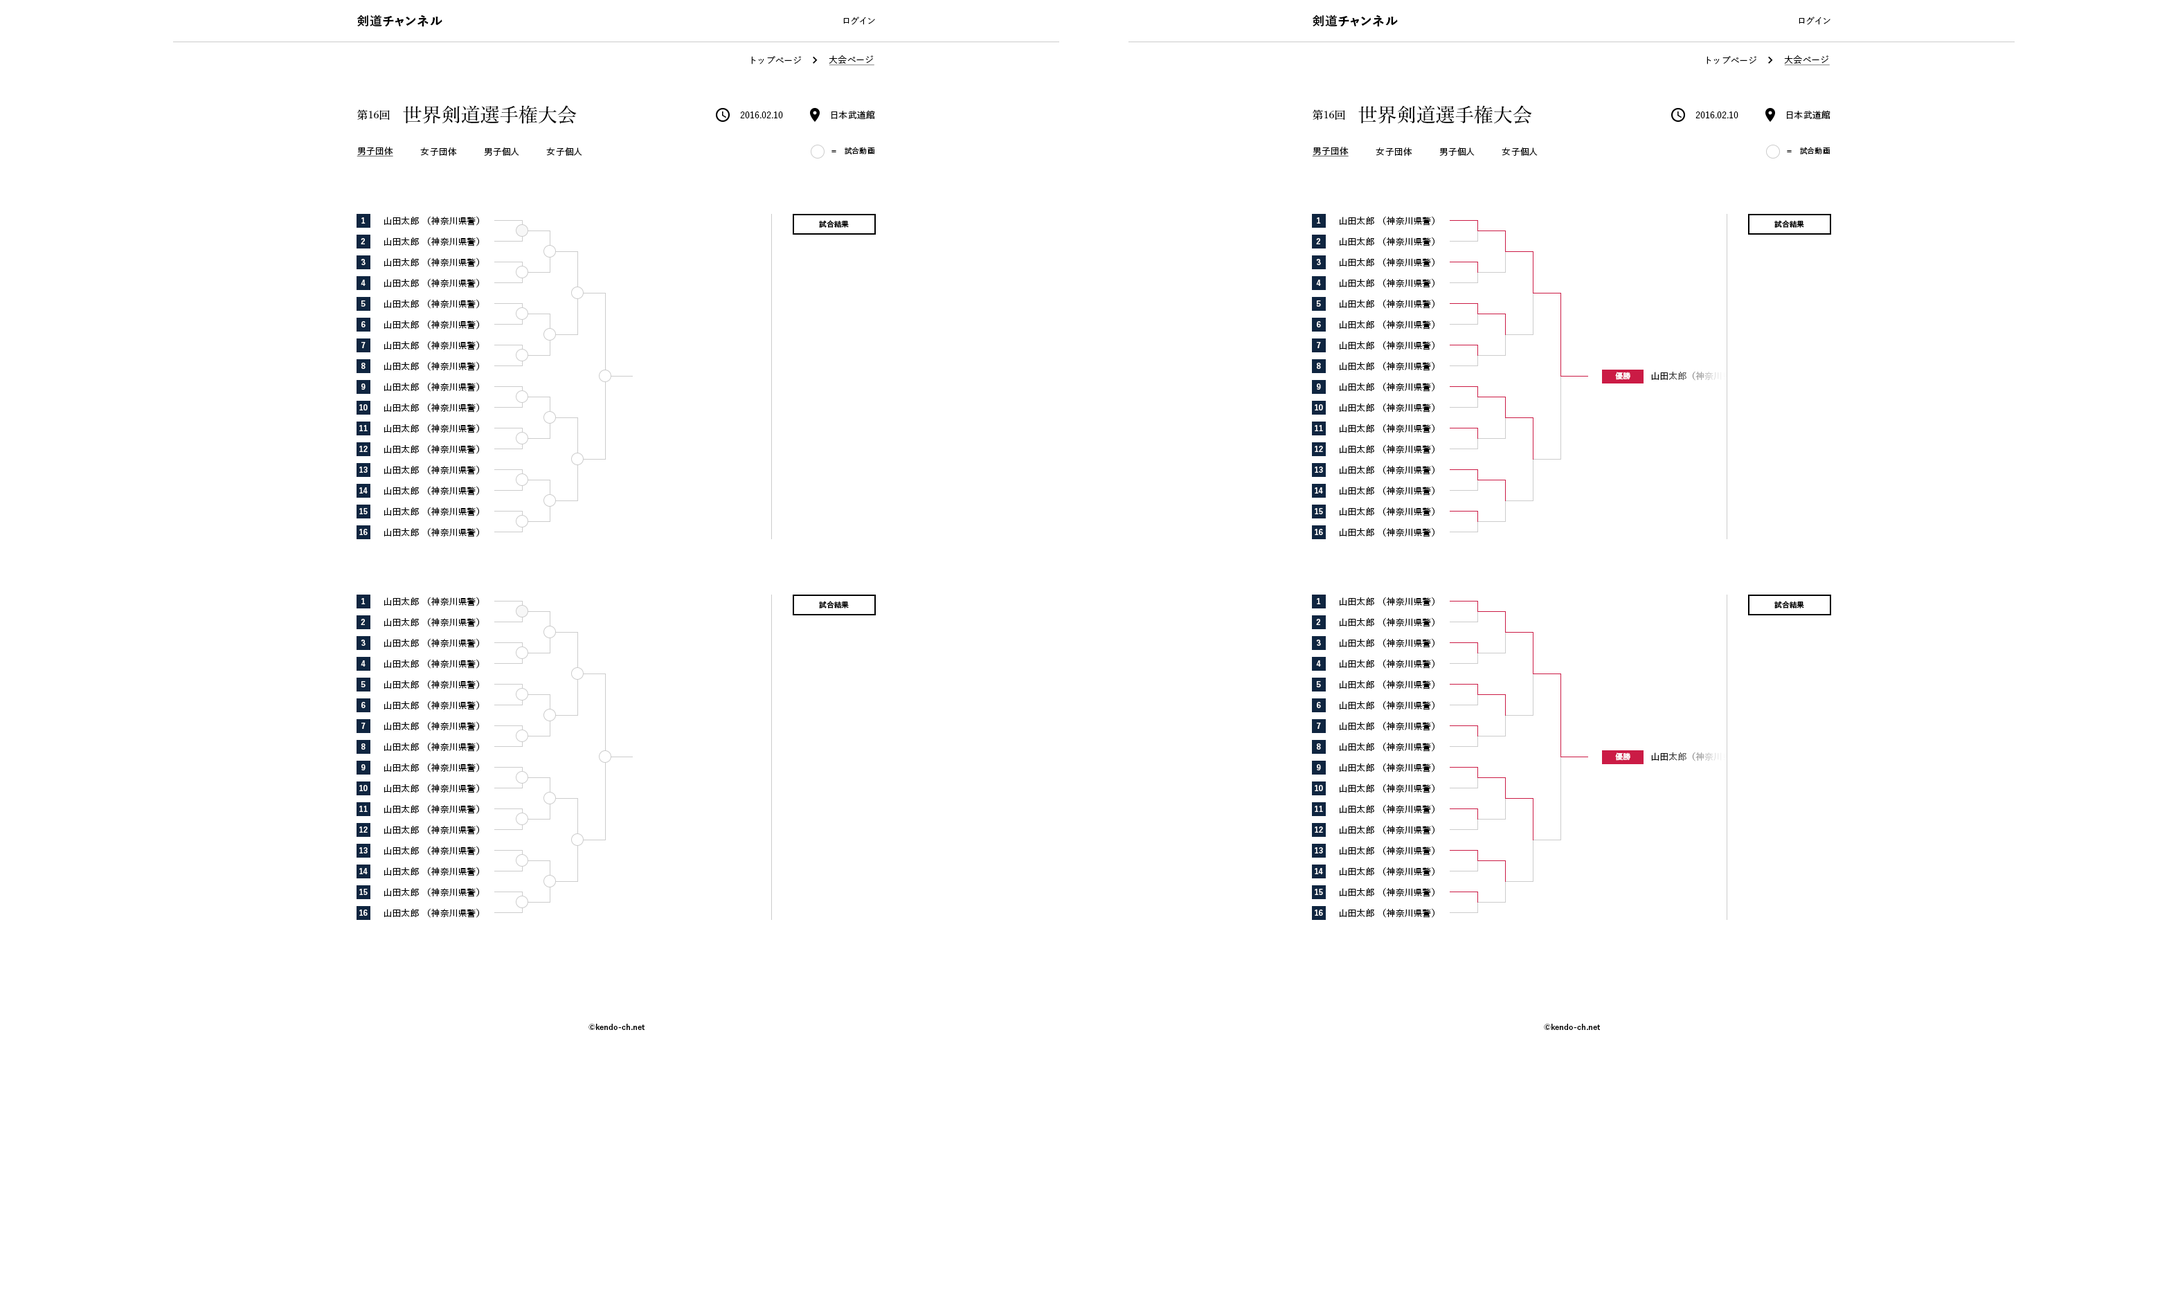
<style>
.page{position:relative;width:2160px;height:1293px;background:#ffffff}
.page>*{position:absolute;margin:0}
.t1{font:12.5px "YuGo-Bold";letter-spacing:0.05em;color:#000000}
.t2{font:9px "YuGo-Medium";letter-spacing:0.05em;color:#000000}
.t3{font:9px "YuGo-Medium";color:#000000}
.t4{font:9px "YuGo-Medium";color:#000000;text-decoration:underline}
.t5{font:19.4px "YuMin-Medium";color:#000000}
.t6{font:11.1px "YuMin-Medium";color:#000000}
.t7{font:7.6px "YuGo-Medium";color:#000000}
.t8{font:7.6px "YuGo-Medium";letter-spacing:0.05em;color:#000000}
.t9{font:7.6px "YuGo-Bold";letter-spacing:0.05em;color:#ffffff}
.t10{font:7.6px "YuGo-Bold";color:#000000}
.t11{font:7.6px "YuGo-Bold";color:#ffffff}
.t12{font:9px "YuGo-Medium"}
</style>
<div class="page">
<p class="t1" style="left:357px;top:15px;width:85px;height:12px">剣道チャンネル</p>
<p class="t2" style="left:843px;top:17px;width:32px;height:8px">ログイン</p>
<p class="t1" style="left:1313px;top:15px;width:85px;height:12px">剣道チャンネル</p>
<p class="t2" style="left:1799px;top:17px;width:31px;height:8px">ログイン</p>
<p class="t3" style="left:751px;top:56px;width:50px;height:8px">トップページ</p>
<p class="t4" style="left:829px;top:55px;width:45px;height:11px">大会ページ</p>
<p class="t3" style="left:1707px;top:56px;width:49px;height:8px">トップページ</p>
<p class="t4" style="left:1784px;top:55px;width:46px;height:11px">大会ページ</p>
<p class="t5" style="left:357px;top:105px;width:220px;height:19px"><span class="t6">第16回　</span>世界剣道選手権大会</p>
<p class="t3" style="left:740px;top:111px;width:43px;height:7px">2016.02.10</p>
<p class="t3" style="left:831px;top:110px;width:44px;height:9px">日本武道館</p>
<p class="t5" style="left:1313px;top:105px;width:219px;height:19px"><span class="t6">第16回　</span>世界剣道選手権大会</p>
<p class="t3" style="left:1695px;top:111px;width:43px;height:7px">2016.02.10</p>
<p class="t3" style="left:1787px;top:110px;width:43px;height:9px">日本武道館</p>
<p class="t4" style="left:357px;top:147px;width:36px;height:9px">男子団体</p>
<p class="t3" style="left:420px;top:147px;width:37px;height:9px">女子団体</p>
<p class="t3" style="left:484px;top:147px;width:35px;height:9px">男子個人</p>
<p class="t3" style="left:546px;top:147px;width:36px;height:9px">女子個人</p>
<p class="t7" style="left:845px;top:147px;width:29px;height:7px">試合動画</p>
<p class="t4" style="left:1312px;top:147px;width:37px;height:9px">男子団体</p>
<p class="t3" style="left:1376px;top:147px;width:36px;height:9px">女子団体</p>
<p class="t3" style="left:1439px;top:147px;width:36px;height:9px">男子個人</p>
<p class="t3" style="left:1502px;top:147px;width:36px;height:9px">女子個人</p>
<p class="t7" style="left:1800px;top:147px;width:30px;height:7px">試合動画</p>
<p class="t8" style="left:831px;top:150px;width:5px;height:2px">＝</p>
<p class="t8" style="left:1787px;top:150px;width:5px;height:2px">＝</p>
<p class="t9" style="left:361px;top:217px;width:5px;height:7px">1</p>
<p class="t3" style="left:384px;top:216px;width:95px;height:10px">山田太郎 （神奈川県警）</p>
<p class="t10" style="left:819px;top:220px;width:30px;height:8px">試合結果</p>
<p class="t9" style="left:1317px;top:217px;width:4px;height:7px">1</p>
<p class="t3" style="left:1340px;top:216px;width:94px;height:10px">山田太郎 （神奈川県警）</p>
<p class="t10" style="left:1774px;top:220px;width:30px;height:8px">試合結果</p>
<p class="t9" style="left:361px;top:238px;width:4px;height:6px">2</p>
<p class="t3" style="left:384px;top:237px;width:95px;height:9px">山田太郎 （神奈川県警）</p>
<p class="t9" style="left:1316px;top:238px;width:4px;height:6px">2</p>
<p class="t3" style="left:1340px;top:237px;width:94px;height:9px">山田太郎 （神奈川県警）</p>
<p class="t3" style="left:384px;top:258px;width:95px;height:9px">山田太郎 （神奈川県警）</p>
<p class="t3" style="left:1340px;top:258px;width:94px;height:9px">山田太郎 （神奈川県警）</p>
<p class="t9" style="left:361px;top:259px;width:5px;height:6px">3</p>
<p class="t9" style="left:1316px;top:259px;width:5px;height:6px">3</p>
<p class="t9" style="left:361px;top:280px;width:5px;height:6px">4</p>
<p class="t3" style="left:384px;top:278px;width:95px;height:10px">山田太郎 （神奈川県警）</p>
<p class="t9" style="left:1316px;top:280px;width:5px;height:6px">4</p>
<p class="t3" style="left:1340px;top:278px;width:94px;height:10px">山田太郎 （神奈川県警）</p>
<p class="t9" style="left:361px;top:300px;width:5px;height:7px">5</p>
<p class="t3" style="left:384px;top:299px;width:95px;height:10px">山田太郎 （神奈川県警）</p>
<p class="t9" style="left:1316px;top:300px;width:5px;height:7px">5</p>
<p class="t3" style="left:1340px;top:299px;width:94px;height:10px">山田太郎 （神奈川県警）</p>
<p class="t9" style="left:361px;top:321px;width:5px;height:6px">6</p>
<p class="t3" style="left:384px;top:320px;width:95px;height:10px">山田太郎 （神奈川県警）</p>
<p class="t9" style="left:1317px;top:321px;width:4px;height:6px">6</p>
<p class="t3" style="left:1340px;top:320px;width:94px;height:10px">山田太郎 （神奈川県警）</p>
<p class="t9" style="left:361px;top:342px;width:5px;height:6px">7</p>
<p class="t3" style="left:384px;top:341px;width:95px;height:9px">山田太郎 （神奈川県警）</p>
<p class="t9" style="left:1317px;top:342px;width:4px;height:6px">7</p>
<p class="t3" style="left:1340px;top:341px;width:94px;height:9px">山田太郎 （神奈川県警）</p>
<p class="t9" style="left:361px;top:363px;width:5px;height:6px">8</p>
<p class="t3" style="left:384px;top:361px;width:95px;height:10px">山田太郎 （神奈川県警）</p>
<p class="t9" style="left:1317px;top:363px;width:4px;height:6px">8</p>
<p class="t3" style="left:1340px;top:361px;width:94px;height:10px">山田太郎 （神奈川県警）</p>
<p class="t11" style="left:1615px;top:372px;width:15px;height:8px">優勝</p>
<p class="t12" style="left:1651px;top:371px;width:93px;height:10px">山田太郎（神奈川県警）</p>
<p class="t9" style="left:361px;top:384px;width:5px;height:6px">9</p>
<p class="t3" style="left:384px;top:382px;width:95px;height:10px">山田太郎 （神奈川県警）</p>
<p class="t9" style="left:1317px;top:384px;width:4px;height:6px">9</p>
<p class="t3" style="left:1340px;top:382px;width:94px;height:10px">山田太郎 （神奈川県警）</p>
<p class="t9" style="left:359px;top:404px;width:9px;height:7px">10</p>
<p class="t3" style="left:384px;top:403px;width:95px;height:10px">山田太郎 （神奈川県警）</p>
<p class="t9" style="left:1315px;top:404px;width:8px;height:7px">10</p>
<p class="t3" style="left:1340px;top:403px;width:94px;height:10px">山田太郎 （神奈川県警）</p>
<p class="t9" style="left:359px;top:425px;width:9px;height:6px">11</p>
<p class="t3" style="left:384px;top:424px;width:95px;height:9px">山田太郎 （神奈川県警）</p>
<p class="t9" style="left:1315px;top:425px;width:8px;height:6px">11</p>
<p class="t3" style="left:1340px;top:424px;width:94px;height:9px">山田太郎 （神奈川県警）</p>
<p class="t9" style="left:359px;top:446px;width:9px;height:6px">12</p>
<p class="t3" style="left:384px;top:444px;width:95px;height:10px">山田太郎 （神奈川県警）</p>
<p class="t9" style="left:1315px;top:446px;width:8px;height:6px">12</p>
<p class="t3" style="left:1340px;top:444px;width:94px;height:10px">山田太郎 （神奈川県警）</p>
<p class="t9" style="left:359px;top:467px;width:9px;height:6px">13</p>
<p class="t3" style="left:384px;top:465px;width:95px;height:10px">山田太郎 （神奈川県警）</p>
<p class="t9" style="left:1315px;top:467px;width:8px;height:6px">13</p>
<p class="t3" style="left:1340px;top:465px;width:94px;height:10px">山田太郎 （神奈川県警）</p>
<p class="t3" style="left:384px;top:486px;width:95px;height:10px">山田太郎 （神奈川県警）</p>
<p class="t3" style="left:1340px;top:486px;width:94px;height:10px">山田太郎 （神奈川県警）</p>
<p class="t9" style="left:359px;top:487px;width:9px;height:7px">14</p>
<p class="t9" style="left:1315px;top:487px;width:8px;height:7px">14</p>
<p class="t9" style="left:359px;top:508px;width:9px;height:6px">15</p>
<p class="t3" style="left:384px;top:507px;width:95px;height:9px">山田太郎 （神奈川県警）</p>
<p class="t9" style="left:1315px;top:508px;width:8px;height:6px">15</p>
<p class="t3" style="left:1340px;top:507px;width:94px;height:9px">山田太郎 （神奈川県警）</p>
<p class="t9" style="left:359px;top:529px;width:9px;height:6px">16</p>
<p class="t3" style="left:384px;top:528px;width:95px;height:9px">山田太郎 （神奈川県警）</p>
<p class="t9" style="left:1315px;top:529px;width:8px;height:6px">16</p>
<p class="t3" style="left:1340px;top:528px;width:94px;height:9px">山田太郎 （神奈川県警）</p>
<p class="t9" style="left:361px;top:598px;width:5px;height:6px">1</p>
<p class="t3" style="left:384px;top:597px;width:95px;height:9px">山田太郎 （神奈川県警）</p>
<p class="t10" style="left:819px;top:601px;width:30px;height:8px">試合結果</p>
<p class="t9" style="left:1317px;top:598px;width:4px;height:6px">1</p>
<p class="t3" style="left:1340px;top:597px;width:94px;height:9px">山田太郎 （神奈川県警）</p>
<p class="t10" style="left:1774px;top:601px;width:30px;height:8px">試合結果</p>
<p class="t3" style="left:384px;top:618px;width:95px;height:9px">山田太郎 （神奈川県警）</p>
<p class="t3" style="left:1340px;top:618px;width:94px;height:9px">山田太郎 （神奈川県警）</p>
<p class="t9" style="left:361px;top:619px;width:4px;height:6px">2</p>
<p class="t9" style="left:1316px;top:619px;width:4px;height:6px">2</p>
<p class="t9" style="left:361px;top:640px;width:5px;height:6px">3</p>
<p class="t3" style="left:384px;top:638px;width:95px;height:10px">山田太郎 （神奈川県警）</p>
<p class="t9" style="left:1316px;top:640px;width:5px;height:6px">3</p>
<p class="t3" style="left:1340px;top:638px;width:94px;height:10px">山田太郎 （神奈川県警）</p>
<p class="t9" style="left:361px;top:660px;width:5px;height:7px">4</p>
<p class="t3" style="left:384px;top:659px;width:95px;height:10px">山田太郎 （神奈川県警）</p>
<p class="t9" style="left:1316px;top:660px;width:5px;height:7px">4</p>
<p class="t3" style="left:1340px;top:659px;width:94px;height:10px">山田太郎 （神奈川県警）</p>
<p class="t9" style="left:361px;top:681px;width:5px;height:6px">5</p>
<p class="t3" style="left:384px;top:680px;width:95px;height:10px">山田太郎 （神奈川県警）</p>
<p class="t9" style="left:1316px;top:681px;width:5px;height:6px">5</p>
<p class="t3" style="left:1340px;top:680px;width:94px;height:10px">山田太郎 （神奈川県警）</p>
<p class="t9" style="left:361px;top:702px;width:5px;height:6px">6</p>
<p class="t3" style="left:384px;top:701px;width:95px;height:9px">山田太郎 （神奈川県警）</p>
<p class="t9" style="left:1317px;top:702px;width:4px;height:6px">6</p>
<p class="t3" style="left:1340px;top:701px;width:94px;height:9px">山田太郎 （神奈川県警）</p>
<p class="t9" style="left:361px;top:723px;width:5px;height:6px">7</p>
<p class="t3" style="left:384px;top:721px;width:95px;height:10px">山田太郎 （神奈川県警）</p>
<p class="t9" style="left:1317px;top:723px;width:4px;height:6px">7</p>
<p class="t3" style="left:1340px;top:721px;width:94px;height:10px">山田太郎 （神奈川県警）</p>
<p class="t9" style="left:361px;top:744px;width:5px;height:6px">8</p>
<p class="t3" style="left:384px;top:742px;width:95px;height:10px">山田太郎 （神奈川県警）</p>
<p class="t9" style="left:1317px;top:744px;width:4px;height:6px">8</p>
<p class="t3" style="left:1340px;top:742px;width:94px;height:10px">山田太郎 （神奈川県警）</p>
<p class="t11" style="left:1615px;top:753px;width:15px;height:8px">優勝</p>
<p class="t12" style="left:1651px;top:752px;width:93px;height:10px">山田太郎（神奈川県警）</p>
<p class="t9" style="left:361px;top:764px;width:5px;height:7px">9</p>
<p class="t3" style="left:384px;top:763px;width:95px;height:10px">山田太郎 （神奈川県警）</p>
<p class="t9" style="left:1317px;top:764px;width:4px;height:7px">9</p>
<p class="t3" style="left:1340px;top:763px;width:94px;height:10px">山田太郎 （神奈川県警）</p>
<p class="t9" style="left:359px;top:785px;width:9px;height:6px">10</p>
<p class="t3" style="left:384px;top:784px;width:95px;height:9px">山田太郎 （神奈川県警）</p>
<p class="t9" style="left:1315px;top:785px;width:8px;height:6px">10</p>
<p class="t3" style="left:1340px;top:784px;width:94px;height:9px">山田太郎 （神奈川県警）</p>
<p class="t9" style="left:359px;top:806px;width:9px;height:6px">11</p>
<p class="t3" style="left:384px;top:804px;width:95px;height:10px">山田太郎 （神奈川県警）</p>
<p class="t9" style="left:1315px;top:806px;width:8px;height:6px">11</p>
<p class="t3" style="left:1340px;top:804px;width:94px;height:10px">山田太郎 （神奈川県警）</p>
<p class="t9" style="left:359px;top:827px;width:9px;height:6px">12</p>
<p class="t3" style="left:384px;top:825px;width:95px;height:10px">山田太郎 （神奈川県警）</p>
<p class="t9" style="left:1315px;top:827px;width:8px;height:6px">12</p>
<p class="t3" style="left:1340px;top:825px;width:94px;height:10px">山田太郎 （神奈川県警）</p>
<p class="t3" style="left:384px;top:846px;width:95px;height:10px">山田太郎 （神奈川県警）</p>
<p class="t3" style="left:1340px;top:846px;width:94px;height:10px">山田太郎 （神奈川県警）</p>
<p class="t9" style="left:359px;top:847px;width:9px;height:7px">13</p>
<p class="t9" style="left:1315px;top:847px;width:8px;height:7px">13</p>
<p class="t9" style="left:359px;top:868px;width:9px;height:6px">14</p>
<p class="t3" style="left:384px;top:867px;width:95px;height:9px">山田太郎 （神奈川県警）</p>
<p class="t9" style="left:1315px;top:868px;width:8px;height:6px">14</p>
<p class="t3" style="left:1340px;top:867px;width:94px;height:9px">山田太郎 （神奈川県警）</p>
<p class="t9" style="left:359px;top:889px;width:9px;height:6px">15</p>
<p class="t3" style="left:384px;top:888px;width:95px;height:9px">山田太郎 （神奈川県警）</p>
<p class="t9" style="left:1315px;top:889px;width:8px;height:6px">15</p>
<p class="t3" style="left:1340px;top:888px;width:94px;height:9px">山田太郎 （神奈川県警）</p>
<p class="t9" style="left:359px;top:910px;width:9px;height:6px">16</p>
<p class="t3" style="left:384px;top:908px;width:95px;height:10px">山田太郎 （神奈川県警）</p>
<p class="t9" style="left:1315px;top:910px;width:8px;height:6px">16</p>
<p class="t3" style="left:1340px;top:908px;width:94px;height:10px">山田太郎 （神奈川県警）</p>
<p class="t10" style="left:588px;top:1024px;width:57px;height:6px">©kendo-ch.net</p>
<p class="t10" style="left:1544px;top:1024px;width:56px;height:6px">©kendo-ch.net</p>
</div>
